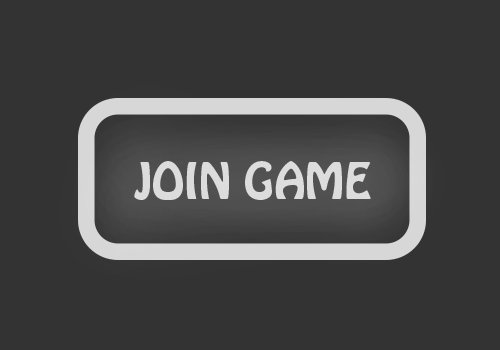
<style>
.page{position:relative;width:500px;height:350px;background:#333333}
.page>*{position:absolute;margin:0}
.t1{font:44.8px "HoboStd";color:#dcdcdc}
</style>
<div class="page">
<p class="t1" style="left:134px;top:161px;width:237px;height:39px">JOIN GAME</p>
</div>
